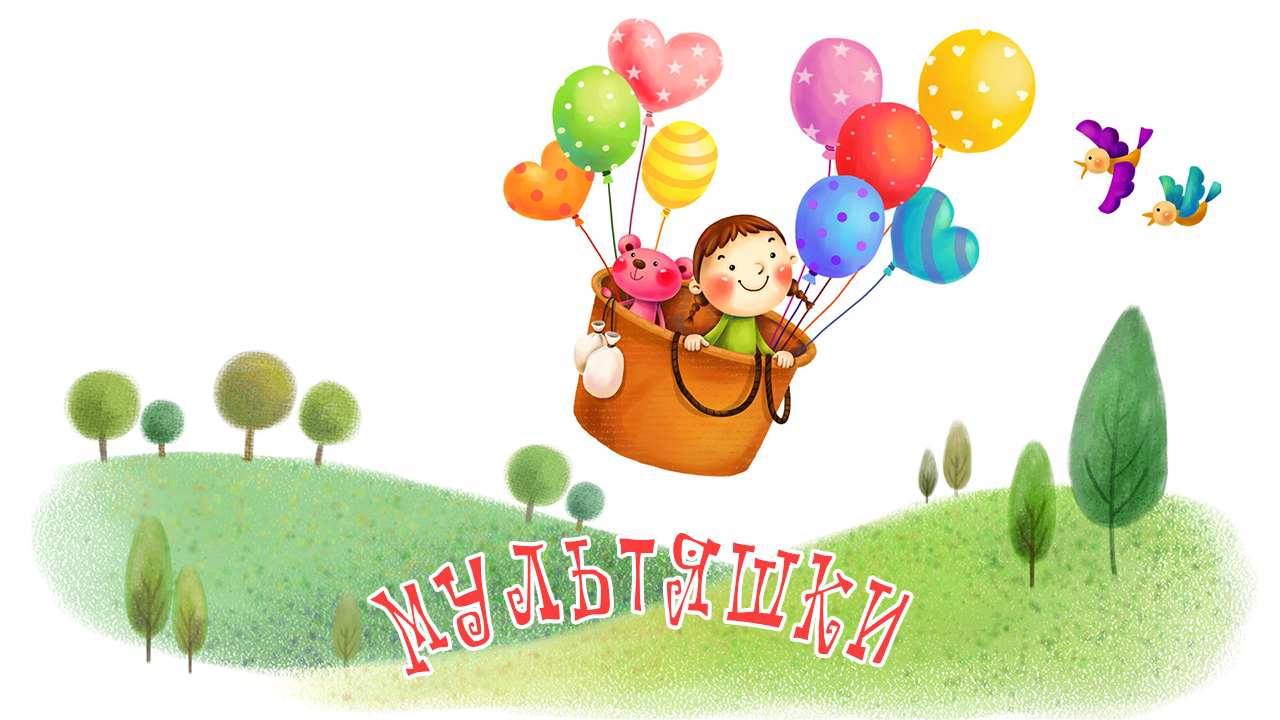
<style>
.page{position:relative;width:1280px;height:720px;background:#ffffff}
.page>*{position:absolute;margin:0}
.t1{font:110px "KotLeopold";letter-spacing:0.1em;color:#f83f3e;scale:0.73 1}
</style>
<div class="page">
<p class="t1" style="left:370px;top:532px;width:540px;height:145px">МУЛЬТЯШКИ</p>
</div>
